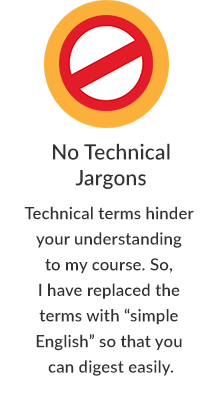
<style>
.page{position:relative;width:216px;height:398px;background:#ffffff}
.page>*{position:absolute;margin:0}
.t1{font:17.1px/25.6px "Lato-Semibold";letter-spacing:0.01em;color:#333333}
.t2{font:21.3px "Lato-Semibold";letter-spacing:0.01em;color:#333333}
.t3{font:17.1px/34.1px "Lato-Semibold";letter-spacing:0.01em;color:#333333}
</style>
<div class="page">
<p class="t1" style="left:24px;top:143px;width:170px;height:233px;text-align:center"><span class="t2">No Technical<br>Jargons<br></span><span class="t3">Technical terms hinder <br></span>your understanding <br>to my course. So, <br>I have replaced the <br>terms with “simple <br>English” so that you <br>can digest easily.</p>
</div>
